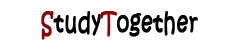
<style>
.page{position:relative;width:250px;height:49px;background:#ffffff}
.page>*{position:absolute;margin:0}
.t1{font:27.7px "KristenITC-Regular";color:#000000;font-weight:bold;scale:0.74 1}
.t2{font:27.7px "KristenITC-Regular";color:#8e0107;font-weight:bold;scale:0.74 1}
</style>
<div class="page">
<p class="t1" style="left:41px;top:11px;width:157px;height:29px"><span class="t2">S</span>tudy<span class="t2">T</span>ogether</p>
</div>
